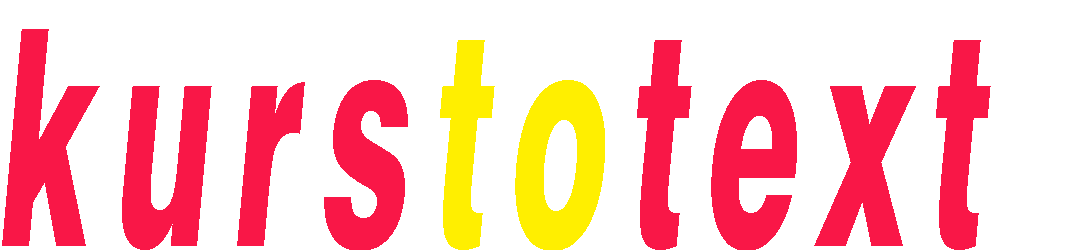
<style>
.page{position:relative;width:1080px;height:250px;background:#ffffff}
.page>*{position:absolute;margin:0}
.t1{font:301.8px "Swiss721BT-Heavy";letter-spacing:0.14em;color:#fa1747;font-style:italic;scale:0.52 1}
.t2{font:301.8px "Swiss721BT-Heavy";letter-spacing:0.14em;color:#fff000;font-style:italic;scale:0.52 1}
</style>
<div class="page">
<p class="t1" style="left:2px;top:29px;width:989px;height:222px">kurs<span class="t2">to</span>text</p>
</div>
